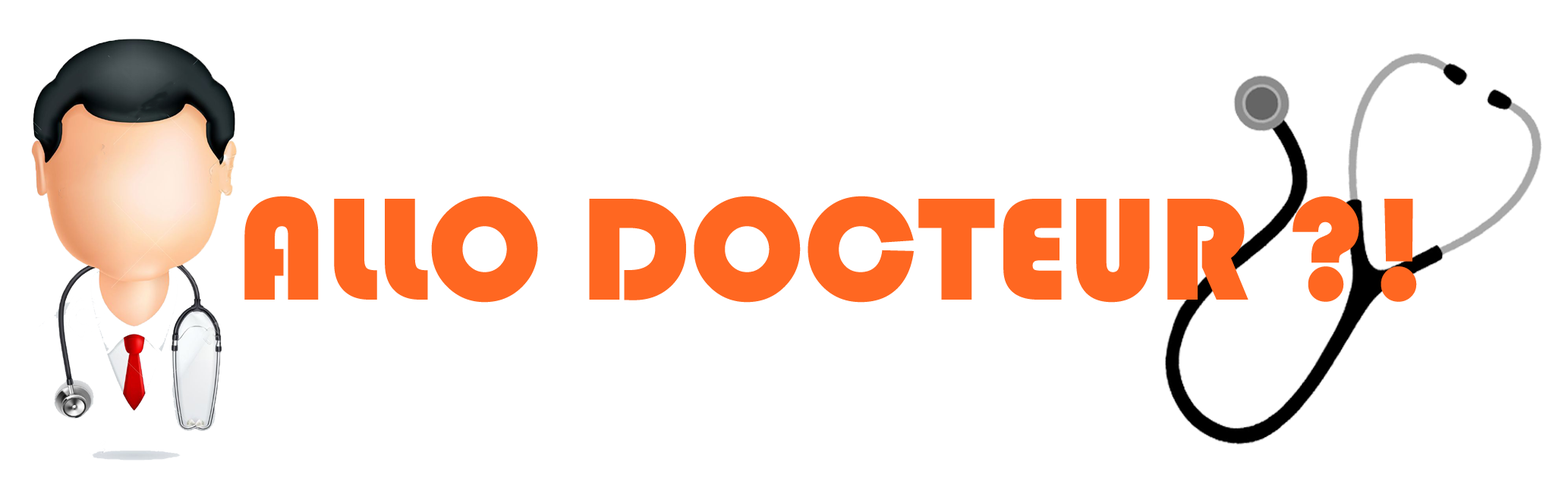
<style>
.page{position:relative;width:1568px;height:487px;background:#ffffff}
.page>*{position:absolute;margin:0}
.t1{font:151.2px "Bauhaus93";color:#ff6721}
</style>
<div class="page">
<p class="t1" style="left:244px;top:196px;width:1173px;height:107px">ALLO DOCTEUR ?!</p>
</div>
